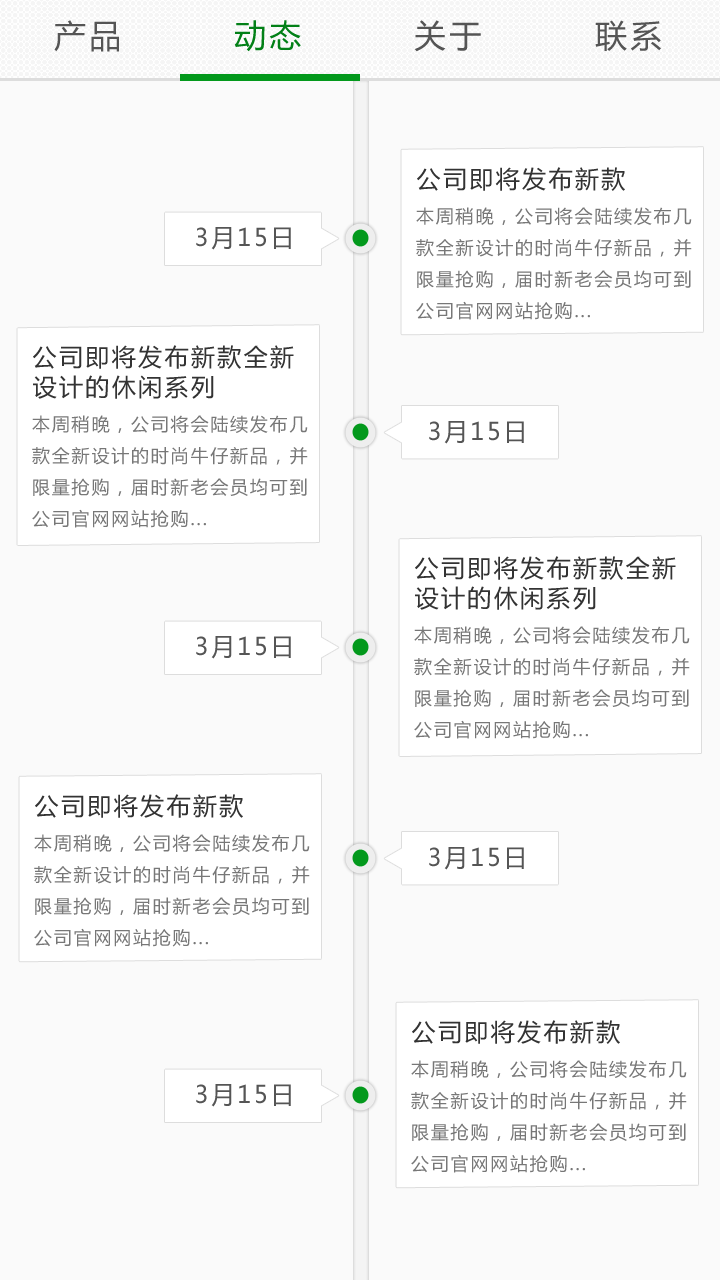
<style>
.page{position:relative;width:720px;height:1280px;background:#fafafa}
.page>*{position:absolute;margin:0}
.t1{font:32px "MicrosoftYaHei";letter-spacing:0.1em;color:#555555}
.t2{font:32px "MicrosoftYaHei";letter-spacing:0.1em;color:#028017}
.t3{font:24px "MicrosoftYaHei";letter-spacing:0.1em;color:#333333}
.t4{font:18px "MicrosoftYaHei";letter-spacing:0.1em;color:#777777}
.t5{font:24px "MicrosoftYaHei";letter-spacing:0.1em;color:#555555}
.t6{font:24px/30px "MicrosoftYaHei";letter-spacing:0.1em;color:#333333}
</style>
<div class="page">
<p class="t1" style="left:54px;top:20px;width:65px;height:32px">产品</p>
<p class="t2" style="left:234px;top:20px;width:67px;height:32px">动态</p>
<p class="t1" style="left:414px;top:20px;width:67px;height:32px">关于</p>
<p class="t1" style="left:595px;top:20px;width:66px;height:31px">联系</p>
<p class="t3" style="left:417px;top:167px;width:208px;height:24px">公司即将发布新款</p>
<p class="t4" style="left:416px;top:207px;width:276px;height:113px">本周稍晚，公司将会陆续发布几款全新设计的时尚牛仔新品，并限量抢购，届时新老会员均可到公司官网网站抢购...</p>
<p class="t5" style="left:196px;top:227px;width:95px;height:23px">3月15日</p>
<p class="t6" style="left:33px;top:345px;width:261px;height:54px">公司即将发布新款全新<br>设计的休闲系列</p>
<p class="t4" style="left:32px;top:415px;width:276px;height:113px">本周稍晚，公司将会陆续发布几款全新设计的时尚牛仔新品，并限量抢购，届时新老会员均可到公司官网网站抢购...</p>
<p class="t5" style="left:429px;top:421px;width:95px;height:23px">3月15日</p>
<p class="t6" style="left:415px;top:556px;width:261px;height:54px">公司即将发布新款全新<br>设计的休闲系列</p>
<p class="t4" style="left:414px;top:626px;width:276px;height:113px">本周稍晚，公司将会陆续发布几款全新设计的时尚牛仔新品，并限量抢购，届时新老会员均可到公司官网网站抢购...</p>
<p class="t5" style="left:196px;top:636px;width:95px;height:23px">3月15日</p>
<p class="t3" style="left:35px;top:794px;width:208px;height:24px">公司即将发布新款</p>
<p class="t4" style="left:34px;top:834px;width:276px;height:113px">本周稍晚，公司将会陆续发布几款全新设计的时尚牛仔新品，并限量抢购，届时新老会员均可到公司官网网站抢购...</p>
<p class="t5" style="left:429px;top:847px;width:95px;height:23px">3月15日</p>
<p class="t3" style="left:412px;top:1020px;width:208px;height:24px">公司即将发布新款</p>
<p class="t4" style="left:411px;top:1060px;width:276px;height:113px">本周稍晚，公司将会陆续发布几款全新设计的时尚牛仔新品，并限量抢购，届时新老会员均可到公司官网网站抢购...</p>
<p class="t5" style="left:196px;top:1084px;width:95px;height:23px">3月15日</p>
</div>
